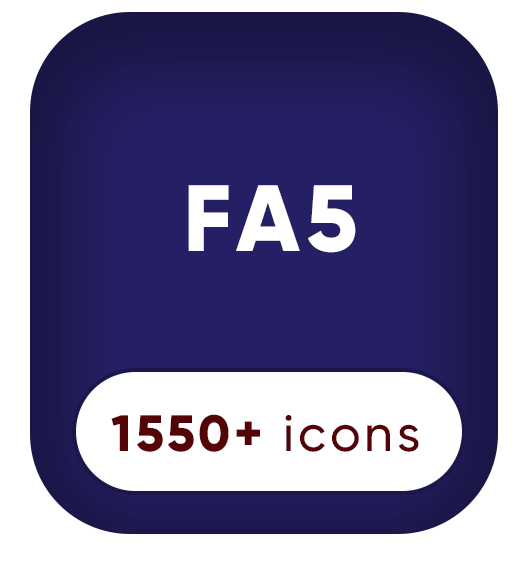
<style>
.page{position:relative;width:523px;height:562px;background:#ffffff}
.page>*{position:absolute;margin:0}
.t1{font:93.8px "Gilroy-ExtraBold";letter-spacing:0.075em;color:#ffffff}
.t2{font:50.9px "Gilroy-ExtraBold";letter-spacing:0.075em;color:#540306}
.t3{font:50.9px "Gilroy-Medium";letter-spacing:0.075em;color:#540306}
</style>
<div class="page">
<p class="t1" style="left:188px;top:185px;width:168px;height:68px">FA5</p>
<p class="t2" style="left:111px;top:414px;width:308px;height:38px">1550+ <span class="t3">icons</span></p>
</div>
